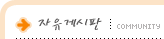
<style>
.page{position:relative;width:164px;height:39px;background:#ffffff}
.page>*{position:absolute;margin:0}
.t1{font:15px "SanBsB";color:#595757}
.t2{font:8px "04b03";color:#b5b3b3}
</style>
<div class="page">
<p class="t1" style="left:38px;top:18px;width:64px;height:13px">자유게시판</p>
<p class="t2" style="left:117px;top:24px;width:43px;height:5px">COMMUNITY</p>
</div>
